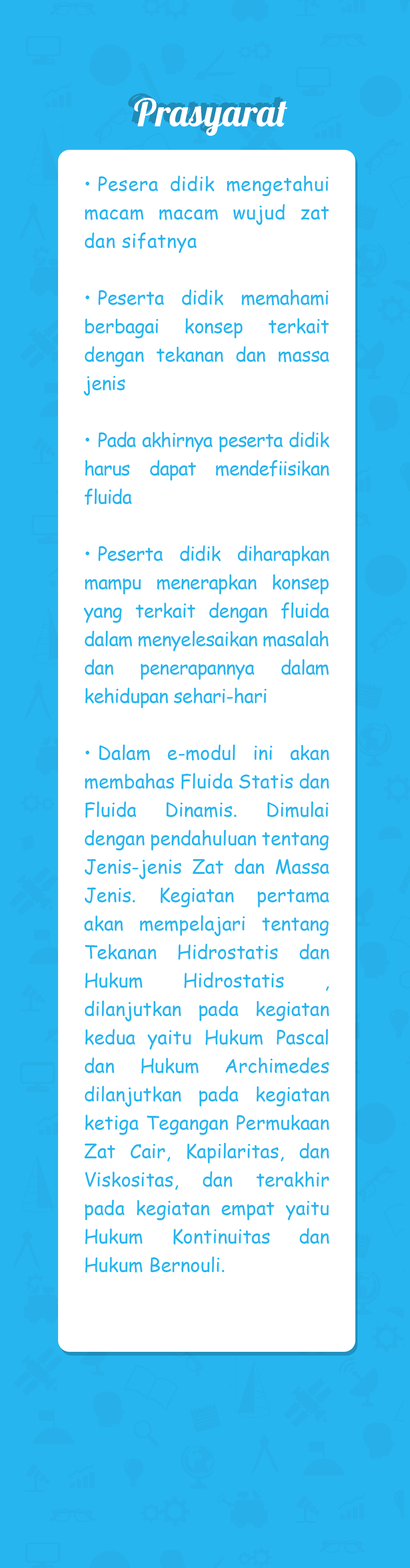
<style>
.page{position:relative;width:410px;height:1568px;background:#ffffff}
.page>*{position:absolute;margin:0}
.t1{font:37.9px "Lobster-Regular";color:#208bb7}
.t2{font:37.9px "Lobster-Regular"}
.t3{font:37.9px "Lobster-Regular";color:#ffffff}
.t4{font:19px/28.4px "ComicSansMS";color:#27b5ef}
.t5{font:19px/28.4px "ComicSansMS";letter-spacing:0.02em;color:#27b5ef}
.t6{font:19px/28.4px "ComicSansMS";letter-spacing:-0.01em;color:#27b5ef}
.t7{font:19px/28.4px "ComicSansMS";letter-spacing:-0.03em;color:#27b5ef}
.t8{font:19px/28.4px "ComicSansMS";letter-spacing:-0.02em;color:#27b5ef}
</style>
<div class="page">
<p class="t1" style="left:128px;top:93px;width:153px;height:38px">Prasyarat</p>
<p class="t2" style="left:131px;top:95px;width:153px;height:38px">Prasyarat</p>
<p class="t3" style="left:134px;top:98px;width:153px;height:38px">Prasyarat</p>
<p class="t4" style="left:83px;top:176px;width:246px;height:1097px;text-align:justify"><span class="t5">• Pesera didik mengetahui macam macam wujud zat dan sifatnya<br><br></span><span class="t6">• Peserta didik memahami berbagai konsep terkait dengan tekanan dan massa jenis<br><br></span><span class="t7">• Pada akhirnya peserta didik harus dapat mendefiisikan fluida<br><br></span><span class="t8">• Peserta didik diharapkan mampu menerapkan konsep yang terkait dengan fluida dalam menyelesaikan masalah dan penerapannya dalam kehidupan sehari-hari <br><br></span>• Dalam e-modul ini akan membahas Fluida Statis dan Fluida Dinamis. Dimulai dengan pendahuluan tentang Jenis-jenis Zat dan Massa Jenis. Kegiatan pertama akan mempelajari tentang Tekanan Hidrostatis dan Hukum Hidrostatis , dilanjutkan pada kegiatan kedua yaitu Hukum Pascal dan Hukum Archimedes dilanjutkan pada kegiatan ketiga Tegangan Permukaan Zat Cair, Kapilaritas, dan Viskositas, dan terakhir pada kegiatan empat yaitu Hukum Kontinuitas dan Hukum Bernouli.</p>
</div>
